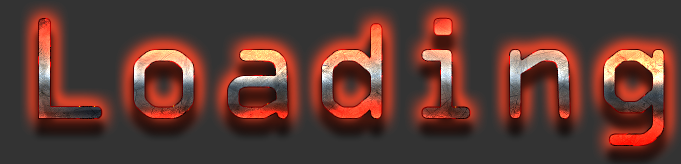
<style>
.page{position:relative;width:681px;height:164px;background:#333333}
.page>*{position:absolute;margin:0}
.t1{font:130px "OCRAStd"}
</style>
<div class="page">
<p class="t1" style="left:38px;top:17px;width:627px;height:129px">Loading</p>
</div>
